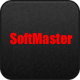
<style>
.page{position:relative;width:80px;height:80px}
.page>*{position:absolute;margin:0}
.t1{font:13.9px "Impact";color:#ff0000}
</style>
<div class="page">
<p class="t1" style="left:10px;top:32px;width:63px;height:13px">SoftMaster</p>
</div>
